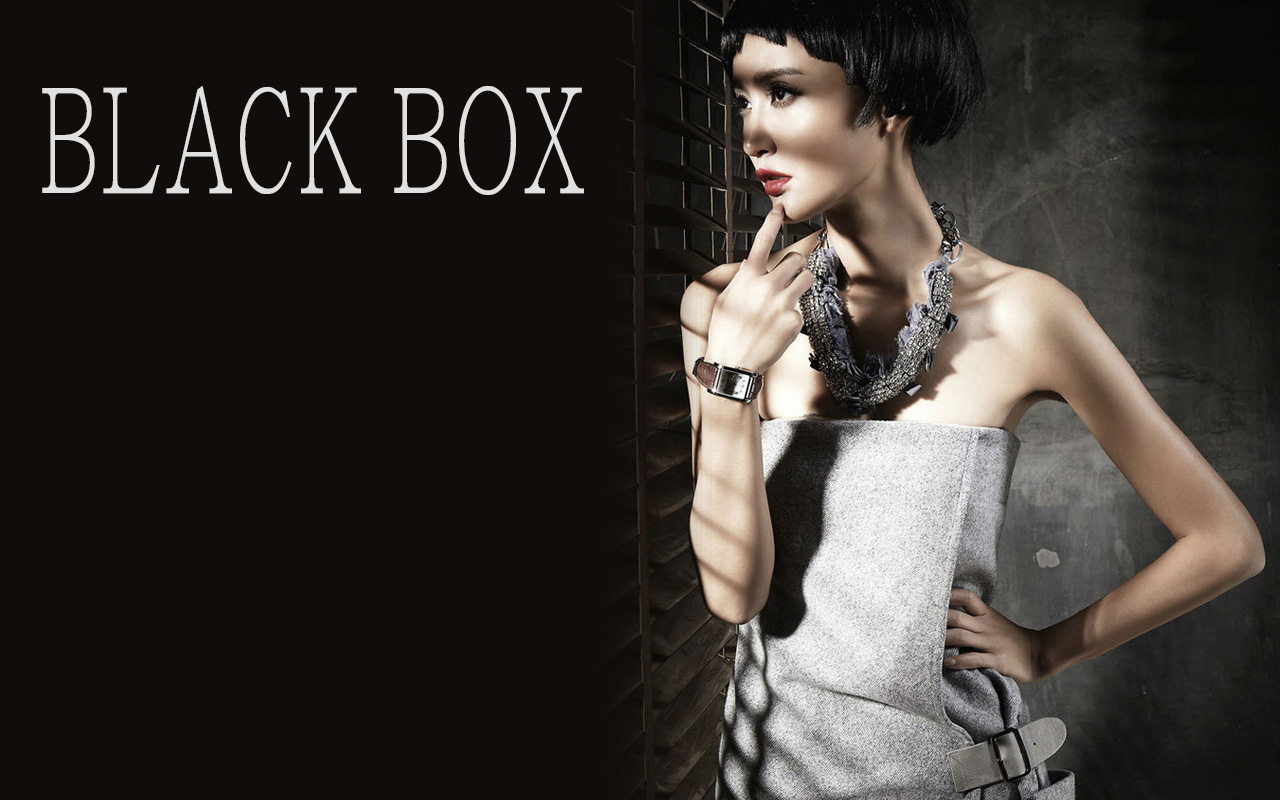
<style>
.page{position:relative;width:1280px;height:800px;background:#110d0a}
.page>*{position:absolute;margin:0}
.t1{font:144px "AdobeMingStd-Light";letter-spacing:0.05em;color:#e1e1e1;scale:0.6 1}
</style>
<div class="page">
<p class="t1" style="left:42px;top:85px;width:542px;height:110px">BLACK BOX</p>
</div>
